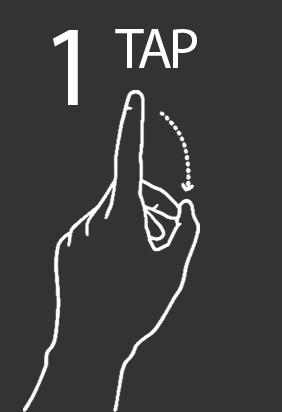
<style>
.page{position:relative;width:282px;height:412px;background:#333333}
.page>*{position:absolute;margin:0}
.t1{font:114.7px "MyriadPro-Regular";letter-spacing:-0.15em;color:#ffffff}
.t2{font:57.4px "MyriadPro-Regular";letter-spacing:-0.05em;color:#ffffff}
</style>
<div class="page">
<p class="t1" style="left:52px;top:30px;width:26px;height:75px">1</p>
<p class="t2" style="left:115px;top:29px;width:82px;height:39px">TAP</p>
</div>
